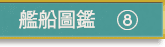
<style>
.page{position:relative;width:165px;height:47px;background:#4b9996}
.page>*{position:absolute;margin:0}
.t1{font:20px "GothicMB101Pro-Regular";color:#f2ebe5;scale:0.96 1}
</style>
<div class="page">
<p class="t1" style="left:18px;top:9px;width:77px;height:20px">艦船圖鑑</p>
</div>
